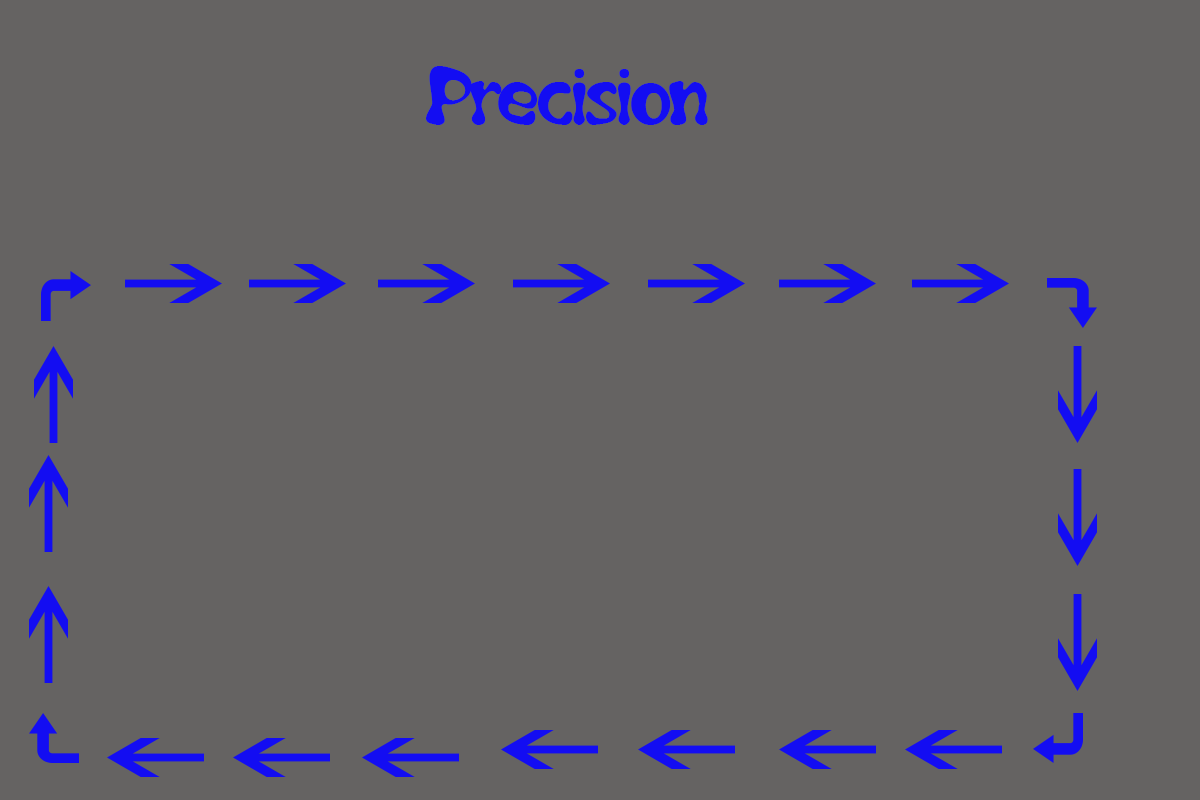
<style>
.page{position:relative;width:1200px;height:800px;background:#656362}
.page>*{position:absolute;margin:0}
.t1{font:72px "Flubber";color:#130df2}
</style>
<div class="page">
<p class="t1" style="left:426px;top:66px;width:282px;height:59px">Precision</p>
</div>
